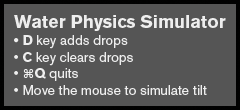
<style>
.page{position:relative;width:240px;height:110px;background:#555555}
.page>*{position:absolute;margin:0}
.t1{font:14px "AkzidenzGroteskBE-Regular";color:#eeeeee}
.t2{font:18px "AkzidenzGroteskBE-Bold";color:#eeeeee}
.t3{font:14px "AkzidenzGroteskBE-Bold";color:#eeeeee}
.t4{font:12px "LucidaGrande";color:#eeeeee}
</style>
<div class="page">
<p class="t1" style="left:14px;top:15px;width:212px;height:80px"><span class="t2">Water Physics Simulator<br></span><span class="t3">• D</span> key adds drops<br>• <span class="t3">C</span> key clears drops<br>• <span class="t4">⌘</span><span class="t3">Q</span> quits<br>• Move the mouse to simulate tilt</p>
</div>
